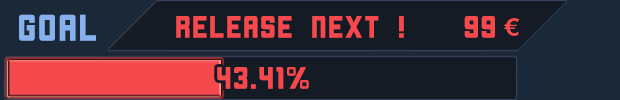
<style>
.page{position:relative;width:620px;height:100px;background:#151b24}
.page>*{position:absolute;margin:0}
.t1{font:36px "Cornerstone";letter-spacing:-0.01em;color:#87b1ec}
.t2{font:30px "Cornerstone";letter-spacing:-0.01em;color:#f5494d}
</style>
<div class="page">
<p class="t1" style="left:19px;top:14px;width:77px;height:27px">Goal</p>
<p class="t2" style="left:176px;top:16px;width:228px;height:22px">Release next !</p>
<p class="t2" style="left:464px;top:16px;width:31px;height:22px">99</p>
<p class="t2" style="left:217px;top:67px;width:92px;height:22px">43.41%</p>
</div>
